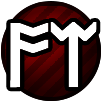
<style>
.page{position:relative;width:101px;height:101px;background:#ffffff}
.page>*{position:absolute;margin:0}
.t1{font:90.1px "SegoeUIHistoric";letter-spacing:-0.06em;color:#ffffff;font-variant:small-caps;font-weight:bold}
</style>
<div class="page">
<p class="t1" style="left:10px;top:22px;width:87px;height:66px">ᚩᛠ</p>
<p class="t1" style="left:10px;top:22px;width:87px;height:66px">ᚩᛠ</p>
</div>
